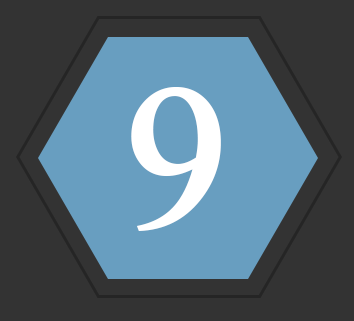
<style>
.page{position:relative;width:354px;height:321px;background:#333333}
.page>*{position:absolute;margin:0}
.t1{font:280px "Rod";color:#ffffff}
</style>
<div class="page">
<p class="t1" style="left:131px;top:86px;width:90px;height:145px">9</p>
</div>
